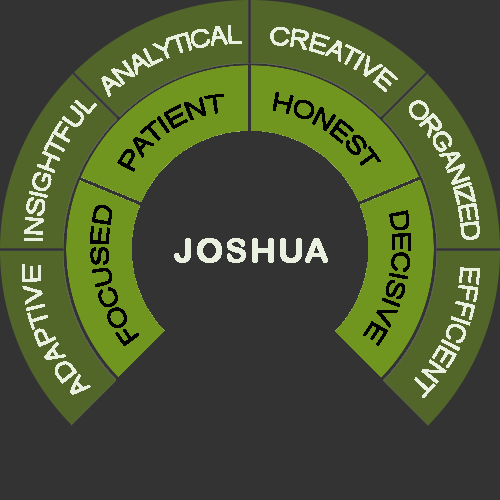
<style>
.page{position:relative;width:500px;height:500px;background:#333333}
.page>*{position:absolute;margin:0}
.t1{font:25px "ArialMT";letter-spacing:-0.05em;color:#eaf0e0;text-transform:uppercase}
.t2{font:25px "ArialMT";letter-spacing:-0.01em;color:#eaf0e0;text-transform:uppercase}
.t3{font:25px "ArialMT";letter-spacing:0.02em;color:#000000;text-transform:uppercase}
.t4{font:33.3px "ArialRoundedMTBold";letter-spacing:0.06em;color:#eaf0e0;text-transform:uppercase;font-weight:bold}
.t5{font:25px "ArialMT";letter-spacing:0.02em;color:#eaf0e0;text-transform:uppercase}
.t6{font:26.2px "ArialMT";color:#eaf0e0;text-transform:uppercase;scale:0.9 1}
</style>
<div class="page">
<p class="t1" style="left:101px;top:25px;width:141px;height:72px;rotate:-22deg">Analytical</p>
<p class="t2" style="left:270px;top:27px;width:128px;height:65px;rotate:22deg">Creative</p>
<p class="t2" style="left:24px;top:100px;width:73px;height:141px;rotate:-68deg">Insightful</p>
<p class="t3" style="left:117px;top:94px;width:107px;height:78px;rotate:-33deg">Patient</p>
<p class="t3" style="left:273px;top:92px;width:108px;height:74px;rotate:33deg">Honest</p>
<p class="t1" style="left:409px;top:100px;width:71px;height:140px;rotate:67deg">Organized</p>
<p class="t3" style="left:90px;top:205px;width:49px;height:141px;rotate:-101deg">Focused</p>
<p class="t3" style="left:363px;top:210px;width:48px;height:136px;rotate:102deg">Decisive</p>
<p class="t4" style="left:174px;top:238px;width:154px;height:25px">Joshua</p>
<p class="t5" style="left:22px;top:264px;width:69px;height:131px;rotate:-112deg">Adaptive</p>
<p class="t6" style="left:414px;top:267px;width:66px;height:131px;rotate:113deg">Efficient</p>
</div>
